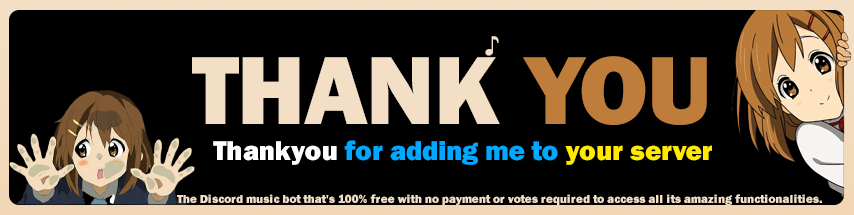
<style>
.page{position:relative;width:854px;height:215px;background:#000000}
.page>*{position:absolute;margin:0}
.t1{font:28px "FranklinGothic-Heavy";color:#f3dfc6}
.t2{font:100px "FranklinGothic-Heavy";color:#f3dfc6}
.t3{font:100px "FranklinGothic-Heavy";color:#be7d3a}
.t4{font:28px "FranklinGothic-Heavy";color:#00a8ff}
.t5{font:28px "FranklinGothic-Heavy";color:#ffffff}
.t6{font:28px "FranklinGothic-Heavy";color:#ffea00}
.t7{font:12px "FranklinGothic-Heavy";color:#f3dfc6}
</style>
<div class="page">
<p class="t1" style="left:485px;top:36px;width:14px;height:20px">♪</p>
<p class="t2" style="left:192px;top:56px;width:515px;height:69px">THANK <span class="t3">YOU</span></p>
<p class="t4" style="left:213px;top:140px;width:499px;height:25px"><span class="t5">Thankyou </span>for adding me to <span class="t6">your server</span></p>
<p class="t7" style="left:177px;top:194px;width:645px;height:11px">The Discord music bot that's 100% free with no payment or votes required to access all its amazing functionalities.</p>
</div>
